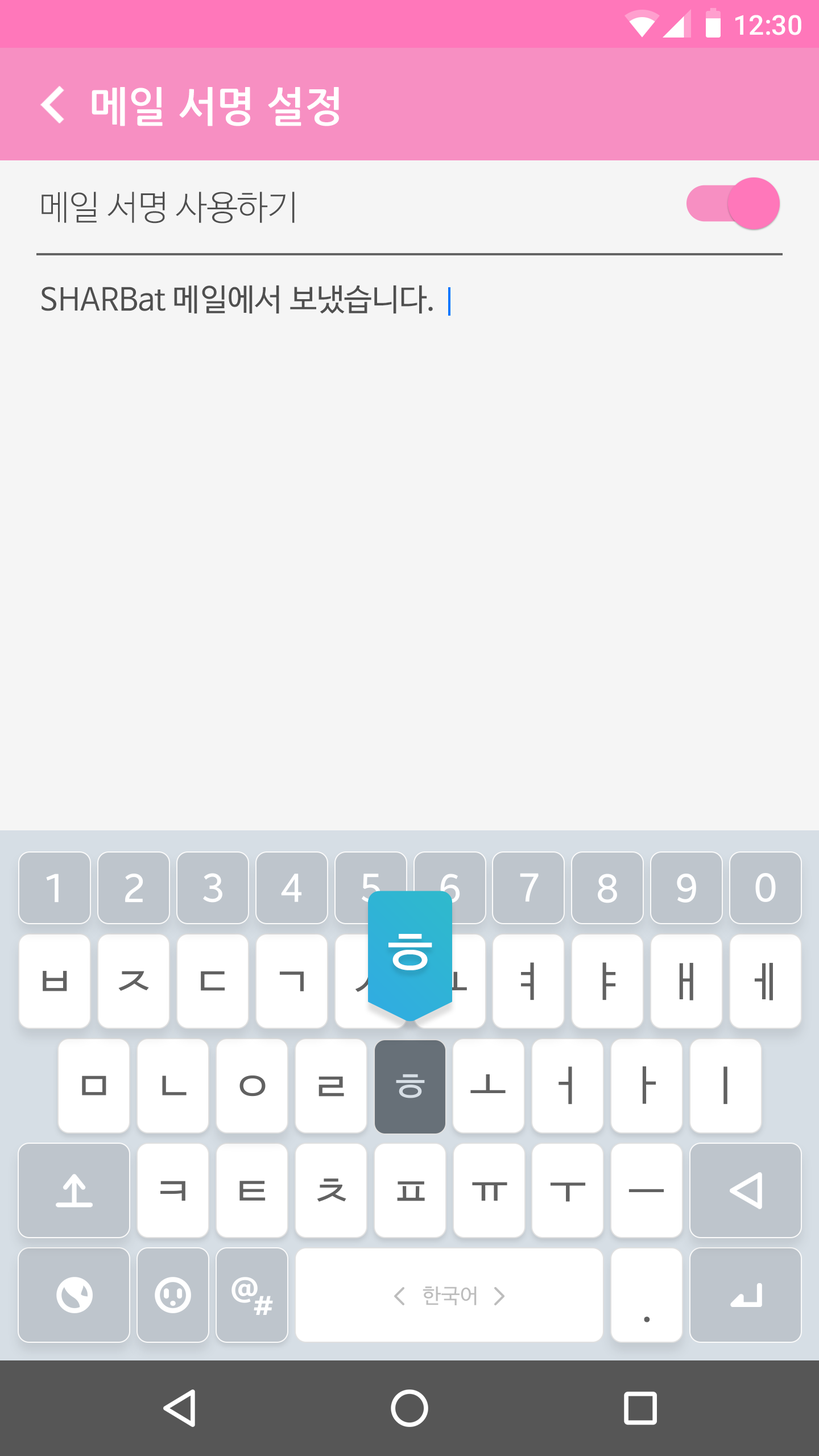
<style>
.page{position:relative;width:819px;height:1456px;background:#f5f5f5}
.page>*{position:absolute;margin:0}
.t1{font:27.3px "Roboto-Medium";color:#ffffff}
.t2{font:40.9px "NanumGothicBold";color:#ffffff}
.t3{font:34.2px "NanumBarunGothicLight";color:#4f4f4f}
.t4{font:30.8px "NanumBarunGothic";color:#4f4f4f}
</style>
<div class="page">
<p class="t1" style="left:735px;top:15px;width:66px;height:20px">12:30</p>
<p class="t2" style="left:92px;top:87px;width:247px;height:39px">메일 서명 설정</p>
<p class="t3" style="left:42px;top:192px;width:253px;height:32px">메일 서명 사용하기</p>
<p class="t4" style="left:42px;top:285px;width:391px;height:29px">SHARBat 메일에서 보냈습니다.</p>
</div>
